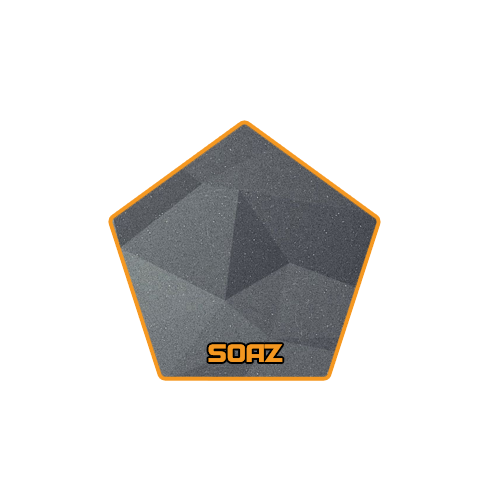
<style>
.page{position:relative;width:500px;height:500px;background:#ffffff}
.page>*{position:absolute;margin:0}
.t1{font:22px "HyundaiNormal";color:#f49720}
</style>
<div class="page">
<p class="t1" style="left:208px;top:344px;width:75px;height:18px">soaz</p>
</div>
